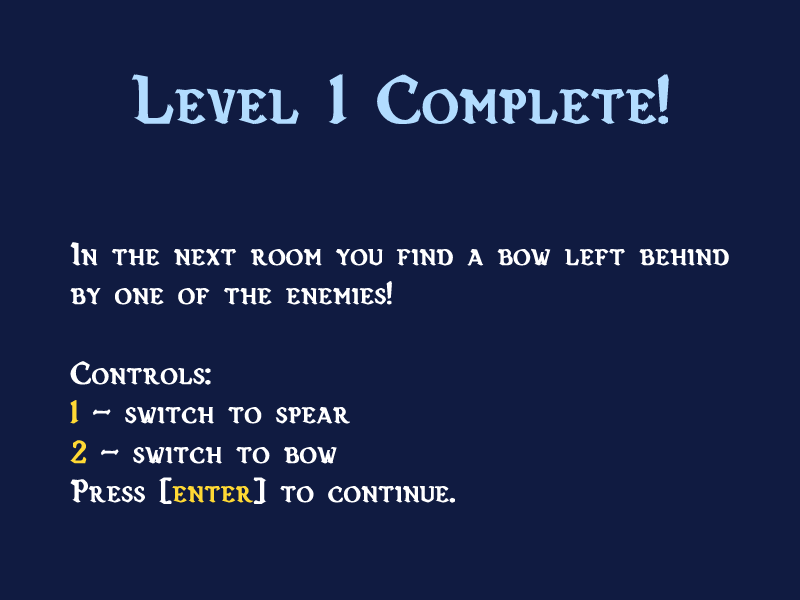
<style>
.page{position:relative;width:800px;height:600px;background:#101b41}
.page>*{position:absolute;margin:0}
.t1{font:70px "Vecna-Bold";color:#b2dcff;font-weight:bold}
.t2{font:33px "Vecna-Bold";color:#ffffff;font-weight:bold}
.t3{font:33px "Vecna-Bold";color:#ffd934;font-weight:bold}
</style>
<div class="page">
<p class="t1" style="left:131px;top:73px;width:538px;height:52px">Level 1 Complete!</p>
<p class="t2" style="left:70px;top:242px;width:659px;height:262px">In the next room you find a bow left behind<br>by one of the enemies!<br><br>Controls:<br><span class="t3">1 </span>- switch to spear<br><span class="t3">2 </span>- switch to bow<br>Press [<span class="t3">enter</span>] to continue.</p>
</div>
